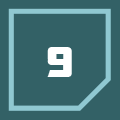
<style>
.page{position:relative;width:120px;height:120px;background:#336166}
.page>*{position:absolute;margin:0}
.t1{font:48px "TransformersMovie";color:#ffffff}
</style>
<div class="page">
<p class="t1" style="left:47px;top:47px;width:25px;height:30px">9</p>
</div>
